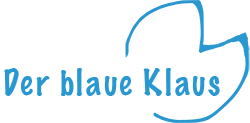
<style>
.page{position:relative;width:250px;height:123px;background:#ffffff}
.page>*{position:absolute;margin:0}
.t1{font:32.9px "MarkerFelt-Thin";letter-spacing:0.05em;color:#2a98d0}
</style>
<div class="page">
<p class="t1" style="left:4px;top:68px;width:216px;height:28px">Der blaue Klaus</p>
</div>
